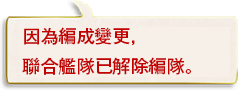
<style>
.page{position:relative;width:238px;height:90px;background:#f6f0e9}
.page>*{position:absolute;margin:0}
.t1{font:18px/30px "GothicMB101Pr6N-Medium";color:#c20000}
</style>
<div class="page">
<p class="t1" style="left:22px;top:27px;width:169px;height:48px">因為編成變更，<br>聯合艦隊已解除編隊。</p>
</div>
